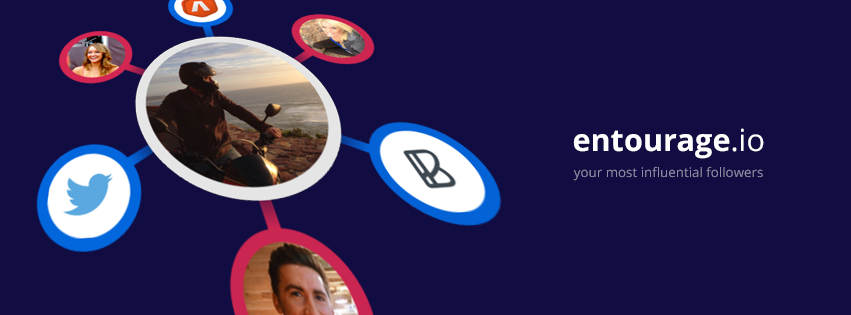
<style>
.page{position:relative;width:851px;height:315px;background:#110c42}
.page>*{position:absolute;margin:0}
.t1{font:30.4px "OpenSans-Bold";color:#ffffff}
.t2{font:30.4px "OpenSans";color:#ffffff}
.t3{font:13.3px "OpenSans";color:#908ea7}
</style>
<div class="page">
<p class="t1" style="left:573px;top:128px;width:191px;height:31px">entourage<span class="t2">.io</span></p>
<p class="t3" style="left:573px;top:166px;width:190px;height:15px">your most influential followers</p>
</div>
